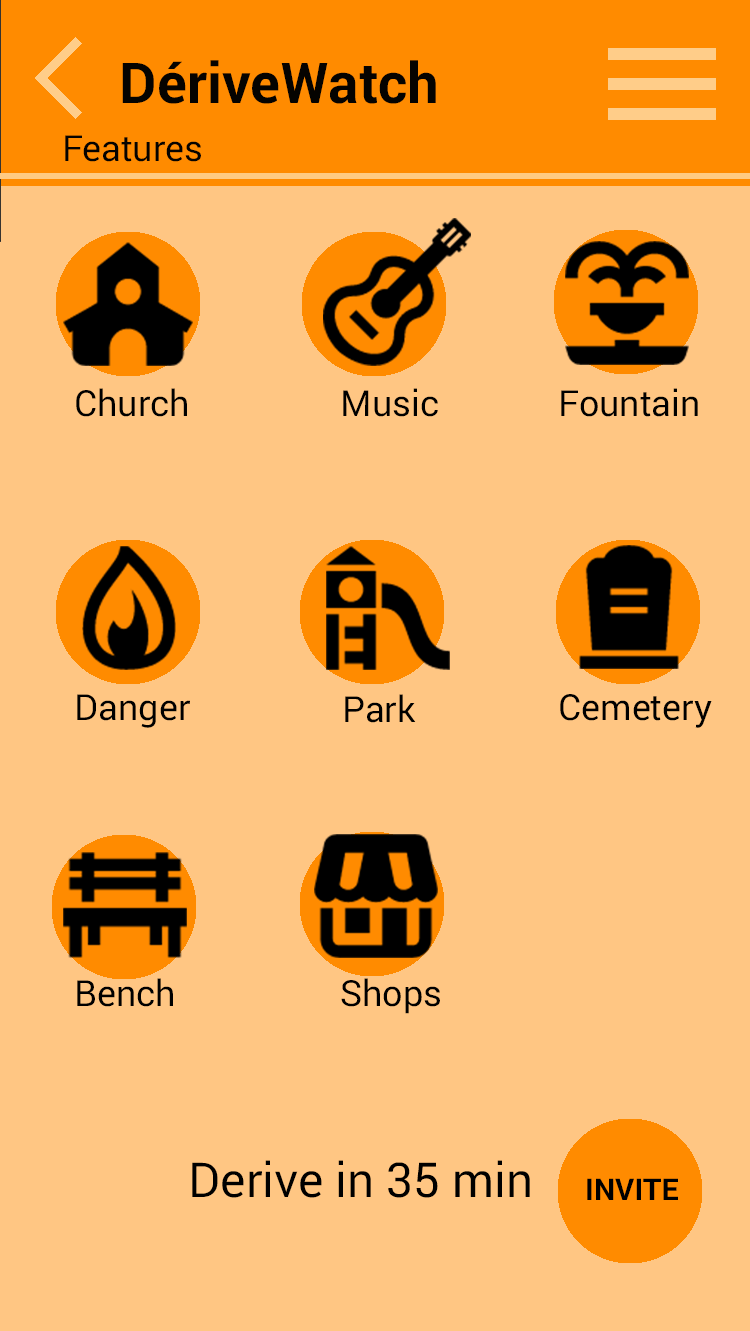
<style>
.page{position:relative;width:750px;height:1331px;background:#ffc683}
.page>*{position:absolute;margin:0}
.t1{font:56.2px "Roboto-Bold";color:#050300}
.t2{font:36px "Roboto-Black";color:#050300}
.t3{font:36px "Roboto-Black";color:#000000}
.t4{font:48px "Roboto-Black";color:#000000}
.t5{font:30px "Roboto-Bold";color:#000000}
</style>
<div class="page">
<p class="t1" style="left:122px;top:60px;width:314px;height:44px">DériveWatch</p>
<p class="t2" style="left:65px;top:135px;width:136px;height:27px">Features</p>
<p class="t3" style="left:76px;top:388px;width:111px;height:29px">Church</p>
<p class="t3" style="left:343px;top:388px;width:95px;height:29px">Music</p>
<p class="t3" style="left:561px;top:388px;width:137px;height:29px">Fountain</p>
<p class="t3" style="left:77px;top:694px;width:113px;height:34px">Danger</p>
<p class="t3" style="left:345px;top:694px;width:71px;height:29px">Park</p>
<p class="t3" style="left:560px;top:694px;width:152px;height:34px">Cemetery</p>
<p class="t3" style="left:77px;top:978px;width:96px;height:29px">Bench</p>
<p class="t3" style="left:341px;top:978px;width:99px;height:36px">Shops</p>
<p class="t4" style="left:192px;top:1160px;width:338px;height:38px">Derive in 35 min</p>
<p class="t5" style="left:587px;top:1178px;width:91px;height:22px">INVITE</p>
</div>
